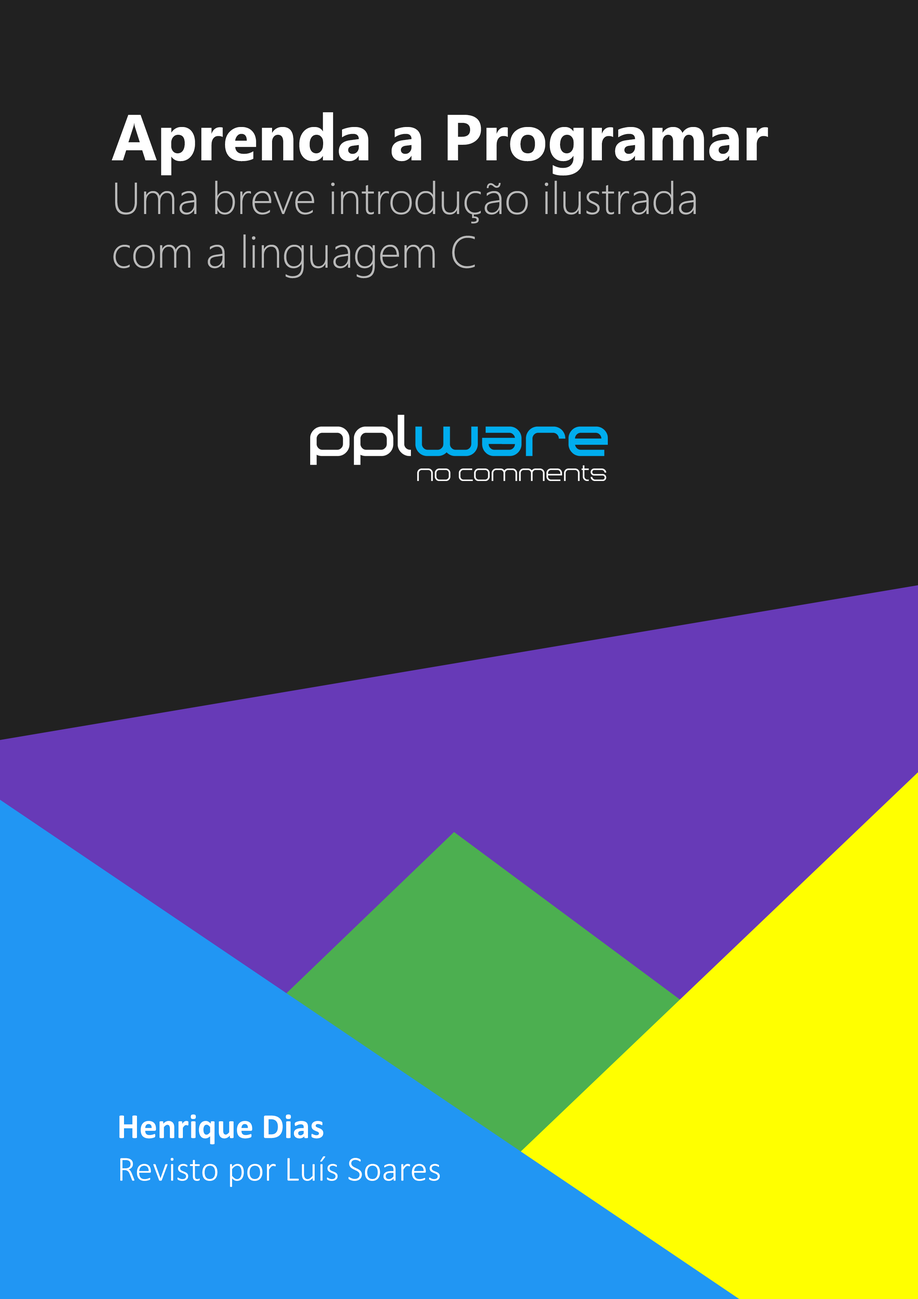
<style>
.page{position:relative;width:918px;height:1299px;background:#212121}
.page>*{position:absolute;margin:0}
.t1{font:44.7px "SegoeUI-Light";color:#b9b9b9}
.t2{font:64.8px "SegoeUI-Bold";color:#ffffff}
.t3{font:35.5px "Calibri-Light";color:#ffffff}
.t4{font:35.5px "Calibri-Bold";color:#ffffff}
</style>
<div class="page">
<p class="t1" style="left:112px;top:112px;width:656px;height:166px"><span class="t2">Aprenda a Programar<br></span>Uma breve introdução ilustrada<br>com a linguagem C</p>
<p class="t3" style="left:119px;top:1114px;width:321px;height:73px"><span class="t4">Henrique Dias<br></span>Revisto por Luís Soares</p>
</div>
